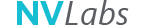
<style>
.page{position:relative;width:146px;height:28px;background:#ffffff}
.page>*{position:absolute;margin:0}
.t1{font:33.3px "SegoeUI-Italic";color:#5a5d61}
.t2{font:33.3px "Montserrat-SemiBold";color:#17bed2}
</style>
<div class="page">
<p class="t1" style="left:17px;top:0px;width:112px;height:25px"><span class="t2">NV</span>Labs</p>
</div>
